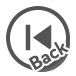
<style>
.page{position:relative;width:76px;height:76px;background:#ffffff}
.page>*{position:absolute;margin:0}
.t1{font:18.8px "MikadoMedium";color:#535453}
</style>
<div class="page">
<p class="t1" style="left:28px;top:41px;width:41px;height:29px;rotate:-30deg">Back</p>
</div>
